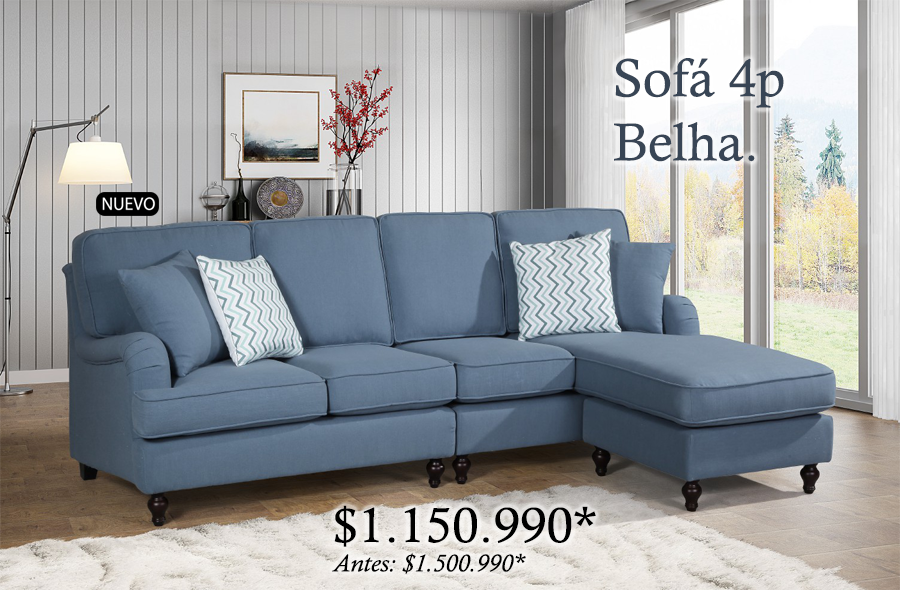
<style>
.page{position:relative;width:900px;height:590px}
.page>*{position:absolute;margin:0}
.t1{font:53.4px "CalistoMT";color:#384555}
.t2{font:24.6px "CalistoMT-Italic";color:#000000;scale:1.06 1}
.t3{font:49.1px "CalistoMT";color:#000000;scale:1.06 1}
</style>
<div class="page">
<p class="t1" style="left:614px;top:58px;width:170px;height:104px">Sofá 4p<br>Belha.</p>
<p class="t2" style="left:332px;top:505px;width:264px;height:69px"><span class="t3">$1.150.990*<br></span>Antes: $1.500.990*</p>
</div>
